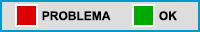
<style>
.page{position:relative;width:200px;height:32px;background:#dddddd}
.page>*{position:absolute;margin:0}
.t1{font:12px "Arial-BoldMT";color:#000000}
</style>
<div class="page">
<p class="t1" style="left:42px;top:11px;width:69px;height:10px">PROBLEMA</p>
<p class="t1" style="left:159px;top:11px;width:18px;height:10px">OK</p>
</div>
